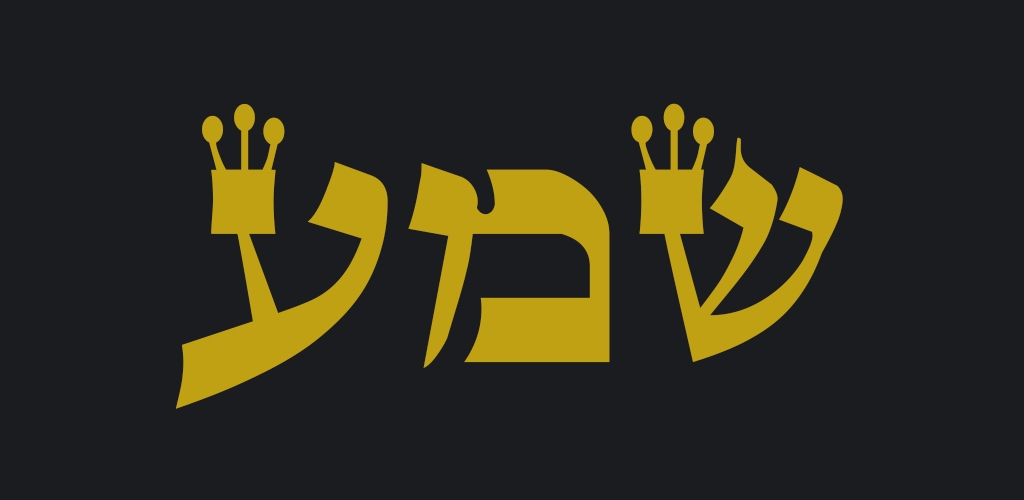
<style>
.page{position:relative;width:1024px;height:500px;background:#1a1c20}
.page>*{position:absolute;margin:0}
.t1{font:375px "StamAshkenazCLM";color:#bfa113}
</style>
<div class="page">
<p class="t1" style="left:175px;top:103px;width:668px;height:306px">עמש</p>
</div>
